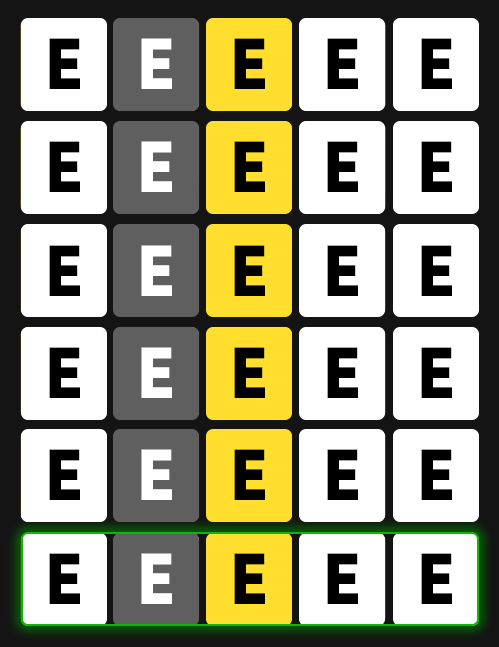
<style>
.page{position:relative;width:499px;height:647px;background:#ffffff}
.page>*{position:absolute;margin:0}
.t1{font:72px "Circe-ExtraBold";color:#000000}
.t2{font:72px "Circe-ExtraBold";color:#ffffff}
</style>
<div class="page">
<p class="t1" style="left:49px;top:38px;width:31px;height:51px">Е</p>
<p class="t2" style="left:141px;top:38px;width:31px;height:51px">Е</p>
<p class="t1" style="left:234px;top:38px;width:31px;height:51px">Е</p>
<p class="t1" style="left:327px;top:38px;width:31px;height:51px">Е</p>
<p class="t1" style="left:421px;top:38px;width:31px;height:51px">Е</p>
<p class="t1" style="left:49px;top:141px;width:31px;height:51px">Е</p>
<p class="t2" style="left:141px;top:141px;width:31px;height:51px">Е</p>
<p class="t1" style="left:234px;top:141px;width:31px;height:51px">Е</p>
<p class="t1" style="left:327px;top:141px;width:31px;height:51px">Е</p>
<p class="t1" style="left:421px;top:141px;width:31px;height:51px">Е</p>
<p class="t1" style="left:49px;top:245px;width:31px;height:51px">Е</p>
<p class="t2" style="left:141px;top:245px;width:31px;height:51px">Е</p>
<p class="t1" style="left:234px;top:245px;width:31px;height:51px">Е</p>
<p class="t1" style="left:327px;top:245px;width:31px;height:51px">Е</p>
<p class="t1" style="left:421px;top:245px;width:31px;height:51px">Е</p>
<p class="t1" style="left:49px;top:347px;width:31px;height:51px">Е</p>
<p class="t2" style="left:141px;top:347px;width:31px;height:51px">Е</p>
<p class="t1" style="left:234px;top:347px;width:31px;height:51px">Е</p>
<p class="t1" style="left:327px;top:347px;width:31px;height:51px">Е</p>
<p class="t1" style="left:421px;top:347px;width:31px;height:51px">Е</p>
<p class="t1" style="left:49px;top:449px;width:31px;height:51px">Е</p>
<p class="t2" style="left:141px;top:449px;width:31px;height:51px">Е</p>
<p class="t1" style="left:234px;top:449px;width:31px;height:51px">Е</p>
<p class="t1" style="left:327px;top:449px;width:31px;height:51px">Е</p>
<p class="t1" style="left:421px;top:449px;width:31px;height:51px">Е</p>
<p class="t1" style="left:49px;top:553px;width:31px;height:51px">Е</p>
<p class="t2" style="left:141px;top:553px;width:31px;height:51px">Е</p>
<p class="t1" style="left:234px;top:553px;width:31px;height:51px">Е</p>
<p class="t1" style="left:327px;top:553px;width:31px;height:51px">Е</p>
<p class="t1" style="left:421px;top:553px;width:31px;height:51px">Е</p>
</div>
